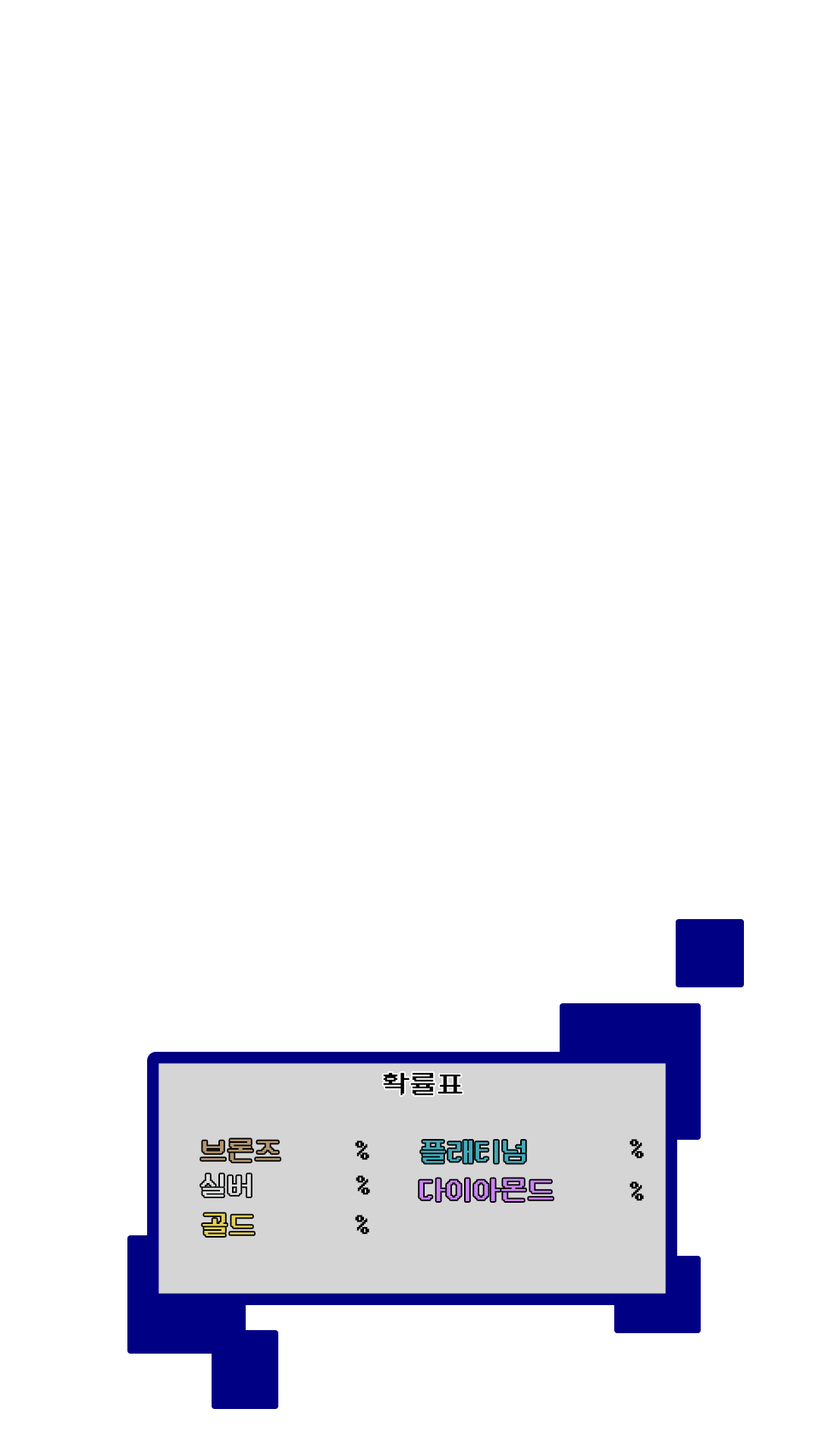
<style>
.page{position:relative;width:819px;height:1456px;background:#ffffff}
.page>*{position:absolute;margin:0}
.t1{font:27.3px "DungGeunMo";color:#000000}
.t2{font:27.3px "DungGeunMo";color:#b39670}
.t3{font:27.3px "DungGeunMo";color:#41aab9}
.t4{font:27.3px "DungGeunMo";color:#dfe1e0}
.t5{font:27.3px "DungGeunMo";color:#cb84f1}
.t6{font:27.3px "DungGeunMo";color:#e3cf59}
</style>
<div class="page">
<p class="t1" style="left:383px;top:1072px;width:80px;height:24px">확률표</p>
<p class="t2" style="left:201px;top:1139px;width:79px;height:23px">브론즈</p>
<p class="t1" style="left:355px;top:1141px;width:14px;height:19px">%</p>
<p class="t3" style="left:421px;top:1141px;width:105px;height:22px">플래티넘</p>
<p class="t1" style="left:629px;top:1139px;width:15px;height:20px">%</p>
<p class="t4" style="left:201px;top:1174px;width:50px;height:23px">실버</p>
<p class="t1" style="left:356px;top:1175px;width:14px;height:20px">%</p>
<p class="t5" style="left:419px;top:1178px;width:134px;height:23px">다이아몬드</p>
<p class="t1" style="left:629px;top:1181px;width:15px;height:20px">%</p>
<p class="t6" style="left:202px;top:1213px;width:52px;height:23px">골드</p>
<p class="t1" style="left:355px;top:1215px;width:14px;height:20px">%</p>
</div>
